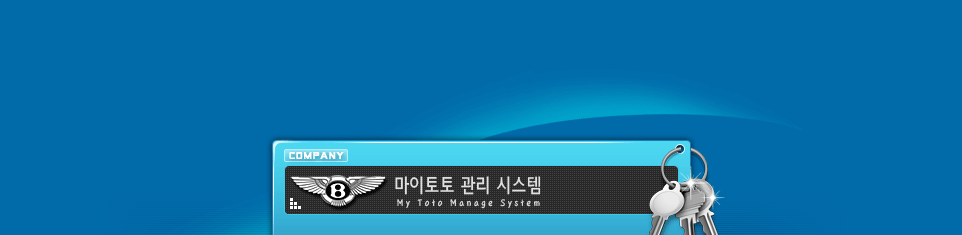
<style>
.page{position:relative;width:962px;height:235px;background:#016aa9}
.page>*{position:absolute;margin:0}
.t1{font:21.6px "SJÁ¤±Û°íµñ";color:#e0e0e0;scale:0.83 1}
.t2{font:10.8px "SJÁÖ¸ñ³ª¹«";letter-spacing:0.31em;color:#e0e0e0;scale:0.83 1}
</style>
<div class="page">
<p class="t1" style="left:395px;top:176px;width:146px;height:19px">마이토토 관리 시스템</p>
<p class="t2" style="left:397px;top:199px;width:143px;height:10px">My Toto Manage System</p>
</div>
